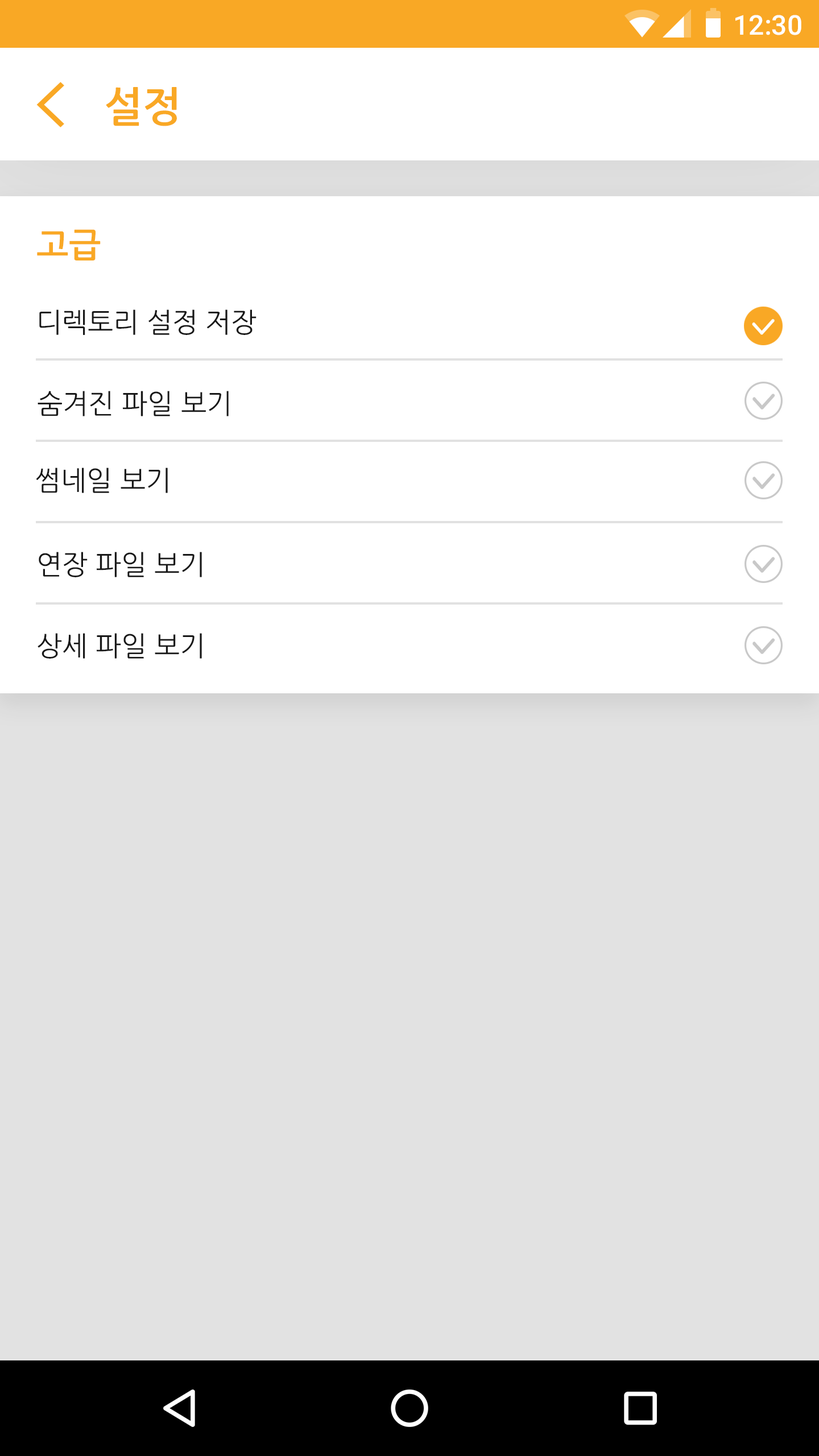
<style>
.page{position:relative;width:819px;height:1456px;background:#e2e2e2}
.page>*{position:absolute;margin:0}
.t1{font:27.3px "Roboto-Medium";color:#ffffff}
.t2{font:40.9px "NanumGothicBold";color:#f9a825}
.t3{font:34.1px "NanumGothicBold";color:#f9a825}
.t4{font:27.3px "NanumGothic";color:#181818}
</style>
<div class="page">
<p class="t1" style="left:735px;top:15px;width:66px;height:20px">12:30</p>
<p class="t2" style="left:106px;top:87px;width:71px;height:39px">설정</p>
<p class="t3" style="left:37px;top:229px;width:64px;height:31px">고급</p>
<p class="t4" style="left:39px;top:309px;width:218px;height:26px">디렉토리 설정 저장</p>
<p class="t4" style="left:38px;top:391px;width:191px;height:25px">숨겨진 파일 보기</p>
<p class="t4" style="left:36px;top:468px;width:132px;height:25px">썸네일 보기</p>
<p class="t4" style="left:39px;top:552px;width:163px;height:25px">연장 파일 보기</p>
<p class="t4" style="left:38px;top:633px;width:164px;height:26px">상세 파일 보기</p>
</div>
